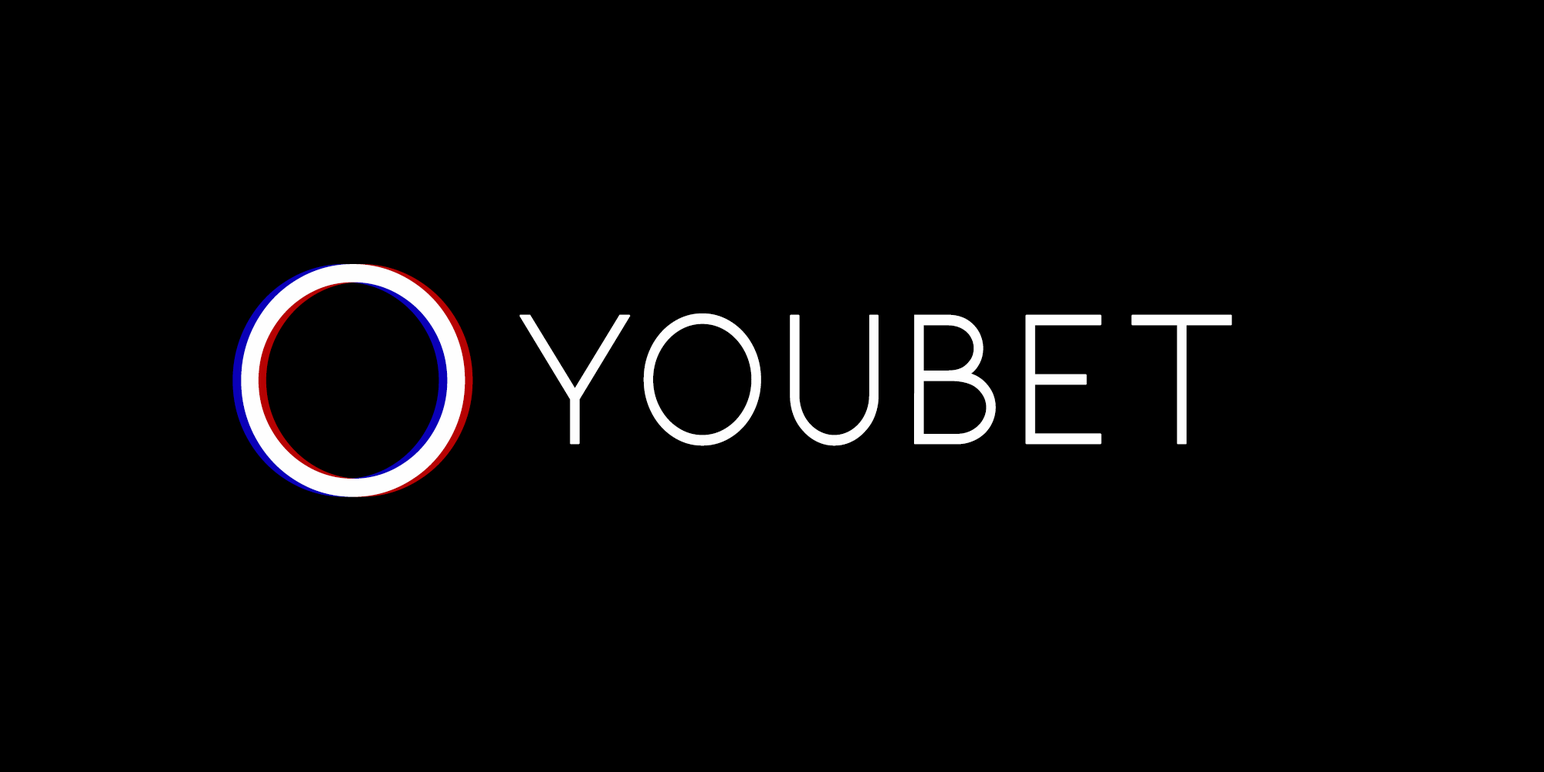
<style>
.page{position:relative;width:1544px;height:772px;background:#000000}
.page>*{position:absolute;margin:0}
.t1{font:347.4px "Kiona-Regular";font-weight:bold;scale:0.97 1}
.t2{font:347.4px "Kiona-Regular";color:#fefefe;font-weight:bold;scale:0.97 1}
.t3{font:196.9px "Kiona-Regular";color:#fefefe;font-weight:bold;scale:0.89 1}
</style>
<div class="page">
<p class="t1" style="left:232px;top:264px;width:225px;height:233px">O</p>
<p class="t2" style="left:241px;top:264px;width:225px;height:233px">O</p>
<p class="t2" style="left:249px;top:264px;width:224px;height:233px">O</p>
<p class="t3" style="left:520px;top:313px;width:712px;height:133px">YOUbet</p>
</div>
